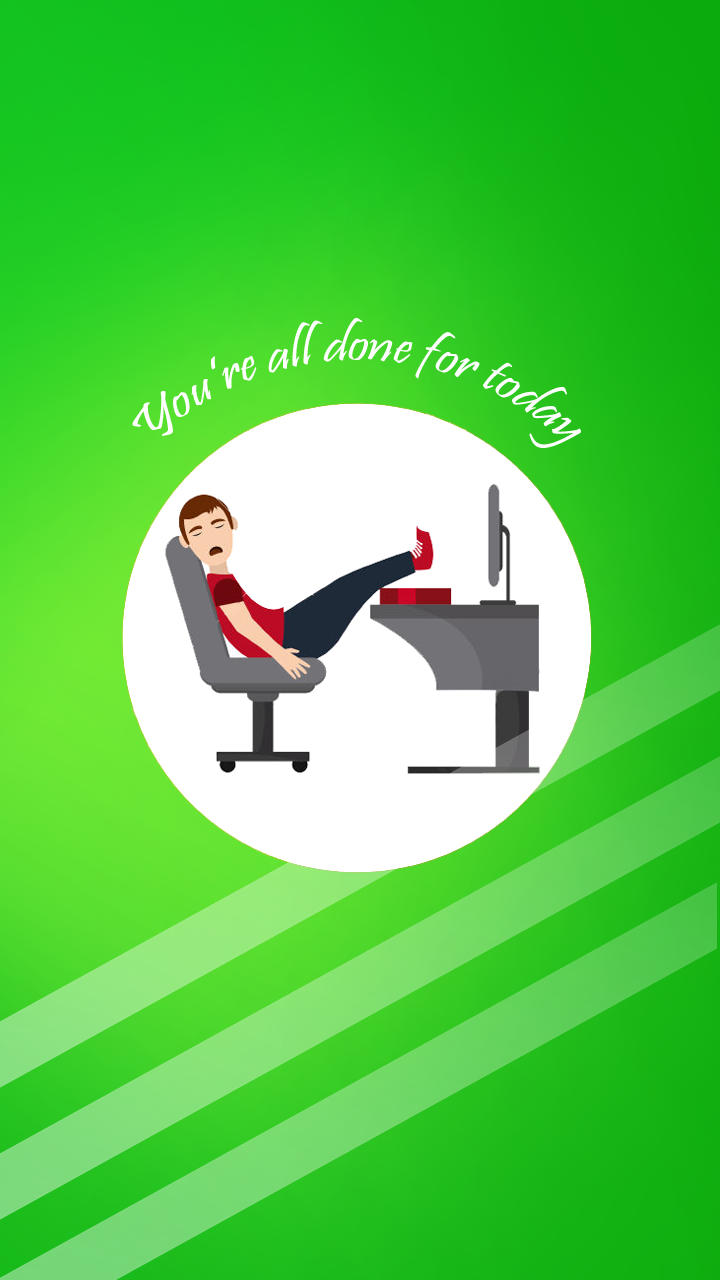
<style>
.page{position:relative;width:720px;height:1280px}
.page>*{position:absolute;margin:0}
.t1{font:49.8px "Pristina-Regular";color:#ffffff}
</style>
<div class="page">
<p class="t1" style="left:132px;top:317px;width:449px;height:131px;text-align:center">You’re all done for today</p>
</div>
